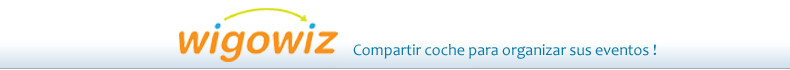
<style>
.page{position:relative;width:790px;height:70px;background:#ffffff}
.page>*{position:absolute;margin:0}
.t1{font:16px "Candara";color:#0779aa}
</style>
<div class="page">
<p class="t1" style="left:353px;top:44px;width:303px;height:15px">Compartir coche para organizar sus eventos !</p>
</div>
